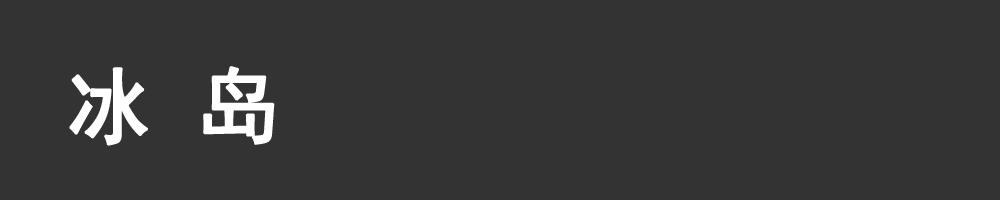
<style>
.page{position:relative;width:1000px;height:200px;background:#333333}
.page>*{position:absolute;margin:0}
.t1{font:83.3px "SimHei";color:#ffffff;font-weight:bold}
</style>
<div class="page">
<p class="t1" style="left:69px;top:66px;width:206px;height:80px">冰 岛</p>
</div>
